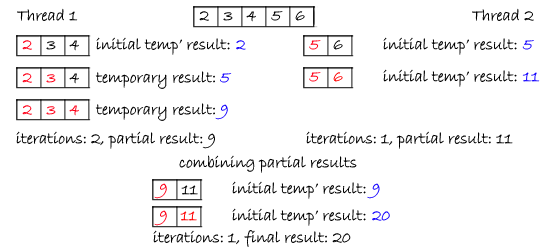
<style>
.page{position:relative;width:550px;height:250px;background:#ffffff}
.page>*{position:absolute;margin:0}
.t1{font:16.7px "BradleyHandITC";color:#000000}
.t2{font:16.7px "BradleyHandITC";color:#ff0018}
.t3{font:16.7px "BradleyHandITC";color:#1200ff}
.t4{font:16.7px "BradleyHandITC"}
.t5{font:16.7px "BradleyHandITC";color:#ff0000}
</style>
<div class="page">
<p class="t1" style="left:17px;top:8px;width:61px;height:13px">Thread 1</p>
<p class="t1" style="left:199px;top:11px;width:10px;height:10px">2</p>
<p class="t1" style="left:223px;top:12px;width:10px;height:9px">3</p>
<p class="t1" style="left:246px;top:11px;width:10px;height:11px">4</p>
<p class="t1" style="left:271px;top:11px;width:12px;height:10px">5</p>
<p class="t1" style="left:295px;top:11px;width:10px;height:10px">6</p>
<p class="t1" style="left:472px;top:8px;width:62px;height:13px">Thread 2</p>
<p class="t2" style="left:22px;top:40px;width:10px;height:10px">2</p>
<p class="t1" style="left:46px;top:41px;width:10px;height:9px">3</p>
<p class="t1" style="left:69px;top:40px;width:10px;height:11px">4</p>
<p class="t1" style="left:96px;top:37px;width:134px;height:18px">initial temp’ result:</p>
<p class="t3" style="left:236px;top:40px;width:10px;height:10px">2</p>
<p class="t2" style="left:309px;top:40px;width:12px;height:10px">5</p>
<p class="t1" style="left:333px;top:40px;width:10px;height:10px">6</p>
<p class="t1" style="left:383px;top:37px;width:134px;height:18px">initial temp’ result:</p>
<p class="t3" style="left:522px;top:40px;width:12px;height:10px">5</p>
<p class="t2" style="left:22px;top:73px;width:10px;height:10px">2</p>
<p class="t2" style="left:46px;top:74px;width:10px;height:9px">3</p>
<p class="t1" style="left:69px;top:73px;width:10px;height:11px">4</p>
<p class="t1" style="left:95px;top:71px;width:120px;height:18px">temporary result:</p>
<p class="t3" style="left:220px;top:73px;width:12px;height:10px">5</p>
<p class="t2" style="left:309px;top:72px;width:12px;height:10px">5</p>
<p class="t4" style="left:333px;top:72px;width:10px;height:10px">6</p>
<p class="t1" style="left:383px;top:69px;width:134px;height:18px">initial temp’ result:</p>
<p class="t3" style="left:522px;top:72px;width:18px;height:10px">11</p>
<p class="t2" style="left:22px;top:105px;width:10px;height:10px">2</p>
<p class="t2" style="left:46px;top:106px;width:10px;height:9px">3</p>
<p class="t2" style="left:69px;top:105px;width:10px;height:11px">4</p>
<p class="t1" style="left:95px;top:103px;width:120px;height:18px">temporary result:</p>
<p class="t3" style="left:215px;top:104px;width:13px;height:16px">9</p>
<p class="t1" style="left:16px;top:131px;width:199px;height:18px">iterations: 2, partial result: 9</p>
<p class="t1" style="left:306px;top:131px;width:207px;height:18px">iterations: 1, partial result: 11</p>
<p class="t1" style="left:179px;top:155px;width:178px;height:18px">combining partial results</p>
<p class="t2" style="left:154px;top:183px;width:13px;height:16px">9</p>
<p class="t1" style="left:181px;top:185px;width:17px;height:10px">11</p>
<p class="t1" style="left:232px;top:181px;width:134px;height:18px">initial temp’ result:</p>
<p class="t3" style="left:367px;top:183px;width:13px;height:16px">9</p>
<p class="t1" style="left:232px;top:208px;width:134px;height:18px">initial temp’ result:</p>
<p class="t2" style="left:154px;top:210px;width:13px;height:16px">9</p>
<p class="t5" style="left:180px;top:211px;width:17px;height:10px">11</p>
<p class="t3" style="left:372px;top:211px;width:18px;height:10px">20</p>
<p class="t1" style="left:153px;top:230px;width:198px;height:17px">iterations: 1, final result: 20</p>
</div>
